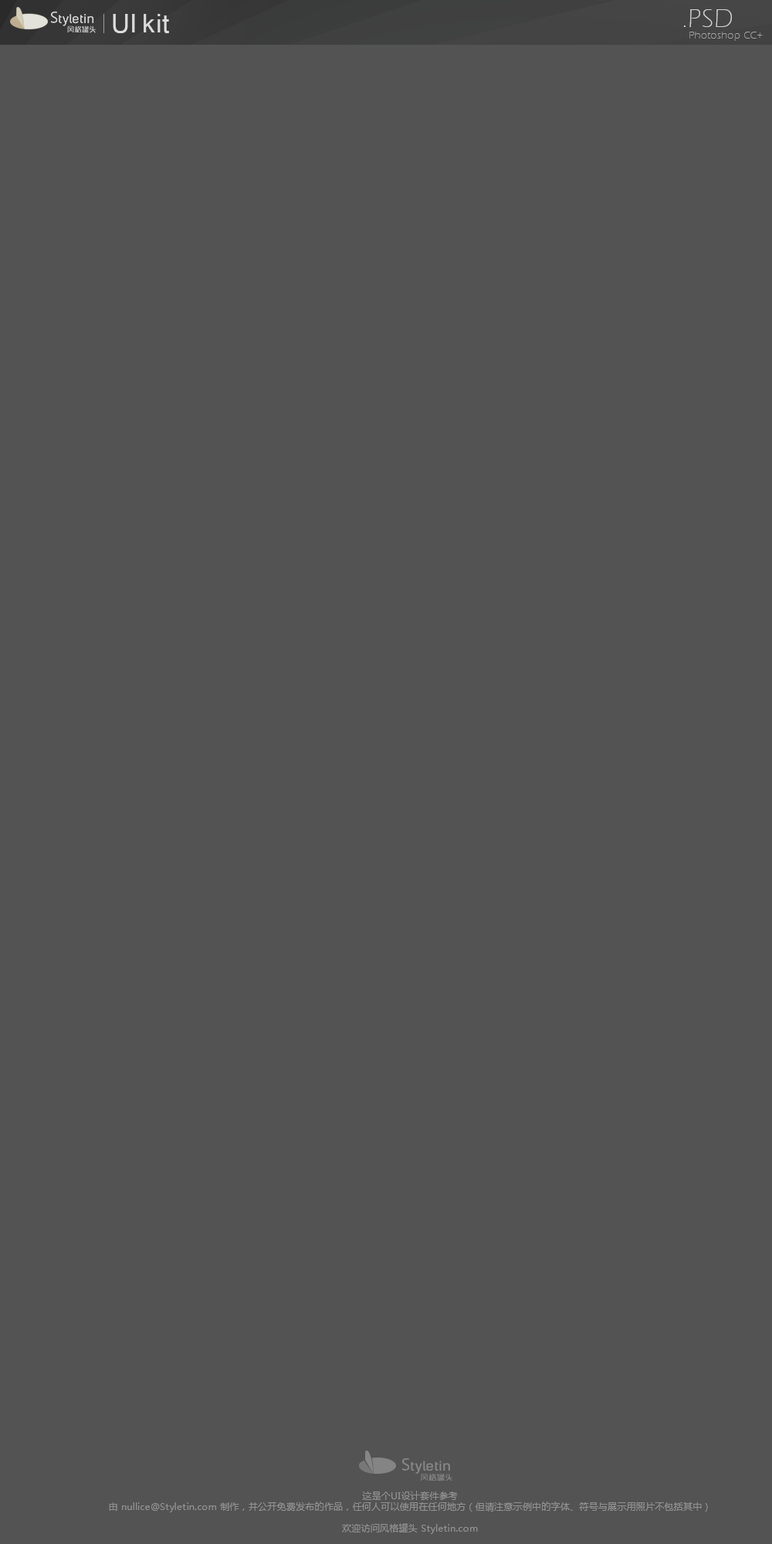
<style>
.page{position:relative;width:772px;height:1544px;background:#535353}
.page>*{position:absolute;margin:0}
.t1{font:27.6px "Gautami";letter-spacing:0.02em;color:#dbdbdb}
.t2{font:26.5px "ErasITC-Light";letter-spacing:0.025em;color:#d4d4d4}
.t3{font:10.8px "ErasITC-Light";letter-spacing:0.025em;color:#a5a5a5}
.t4{font:9.3px/10.8px "MicrosoftYaHei";letter-spacing:0.02em;color:#939393}
</style>
<div class="page">
<p class="t1" style="left:113px;top:14px;width:56px;height:19px">UI kit</p>
<p class="t2" style="left:684px;top:9px;width:48px;height:18px">.PSD</p>
<p class="t3" style="left:690px;top:32px;width:73px;height:9px">Photoshop CC+</p>
<p class="t4" style="left:109px;top:1491px;width:599px;height:43px;text-align:center">这是个UI设计套件参考<br>由 nullice@Styletin.com 制作，并公开免费发布的作品，任何人可以使用在任何地方（但请注意示例中的字体、符号与展示用照片不包括其中）<br><br>欢迎访问风格罐头 Styletin.com</p>
</div>
